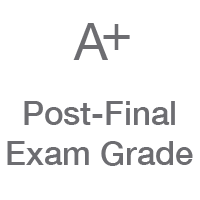
<style>
.page{position:relative;width:200px;height:200px;background:#ffffff}
.page>*{position:absolute;margin:0}
.t1{font:51.8px "HelveticaNeue";color:#6d6d71}
.t2{font:33px "HelveticaNeue-Medium";color:#6d6d71}
</style>
<div class="page">
<p class="t1" style="left:73px;top:23px;width:35px;height:37px">A</p>
<p class="t1" style="left:103px;top:24px;width:27px;height:26px">+</p>
<p class="t2" style="left:7px;top:101px;width:186px;height:65px;text-align:center">Post-Final<br>Exam Grade</p>
</div>
